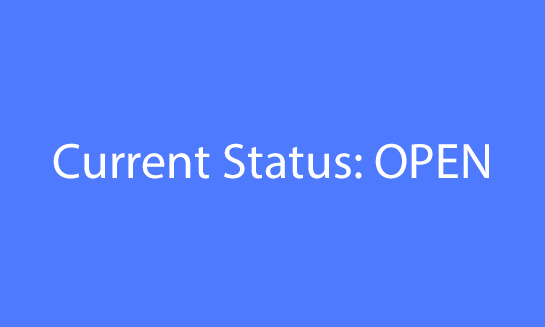
<style>
.page{position:relative;width:545px;height:327px;background:#4d7aff}
.page>*{position:absolute;margin:0}
.t1{font:50px "MyriadPro-Regular";color:#ffffff}
</style>
<div class="page">
<p class="t1" style="left:53px;top:143px;width:436px;height:36px">Current Status: OPEN</p>
</div>
